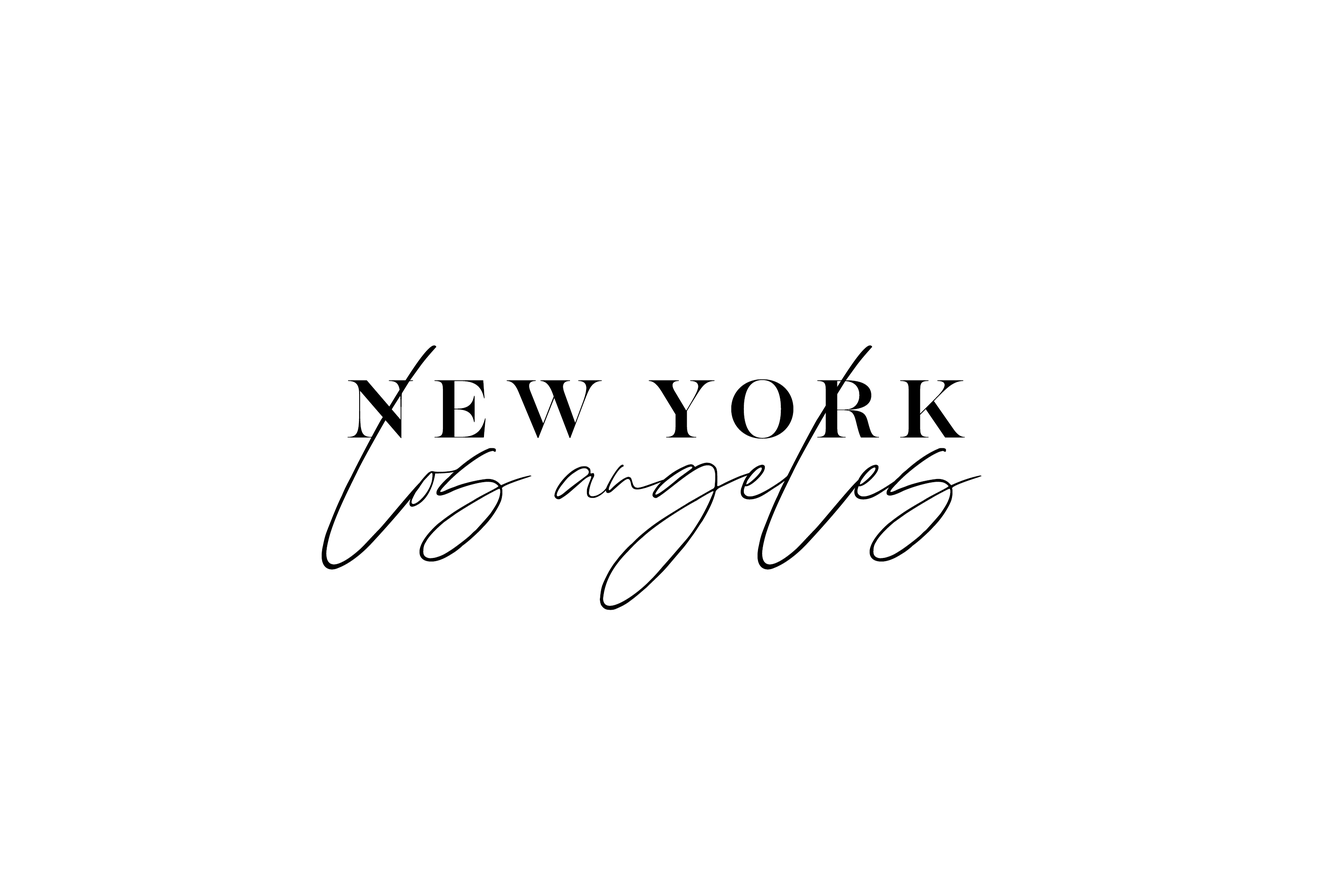
<style>
.page{position:relative;width:1337px;height:892px;background:#ffffff}
.page>*{position:absolute;margin:0}
.t1{font:380.8px "xoBabe-Regular";color:#000000}
.t2{font:92.6px "MajestiBanner-Medium";letter-spacing:0.2em;color:#000000;text-transform:uppercase}
.t3{font:92.6px "MajestiBanner-Medium";letter-spacing:0.2em;color:#000000}
</style>
<div class="page">
<p class="t1" style="left:321px;top:345px;width:661px;height:265px">los angeles</p>
<p class="t2" style="left:348px;top:379px;width:617px;height:60px"><span class="t3">NEW</span> YORK</p>
</div>
